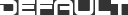
<style>
.page{position:relative;width:128px;height:15px;background:#ffffff}
.page>*{position:absolute;margin:0}
.t1{font:30px "Bitsumishi";color:#ffffff}
</style>
<div class="page">
<p class="t1" style="left:0px;top:0px;width:129px;height:15px">default</p>
</div>
